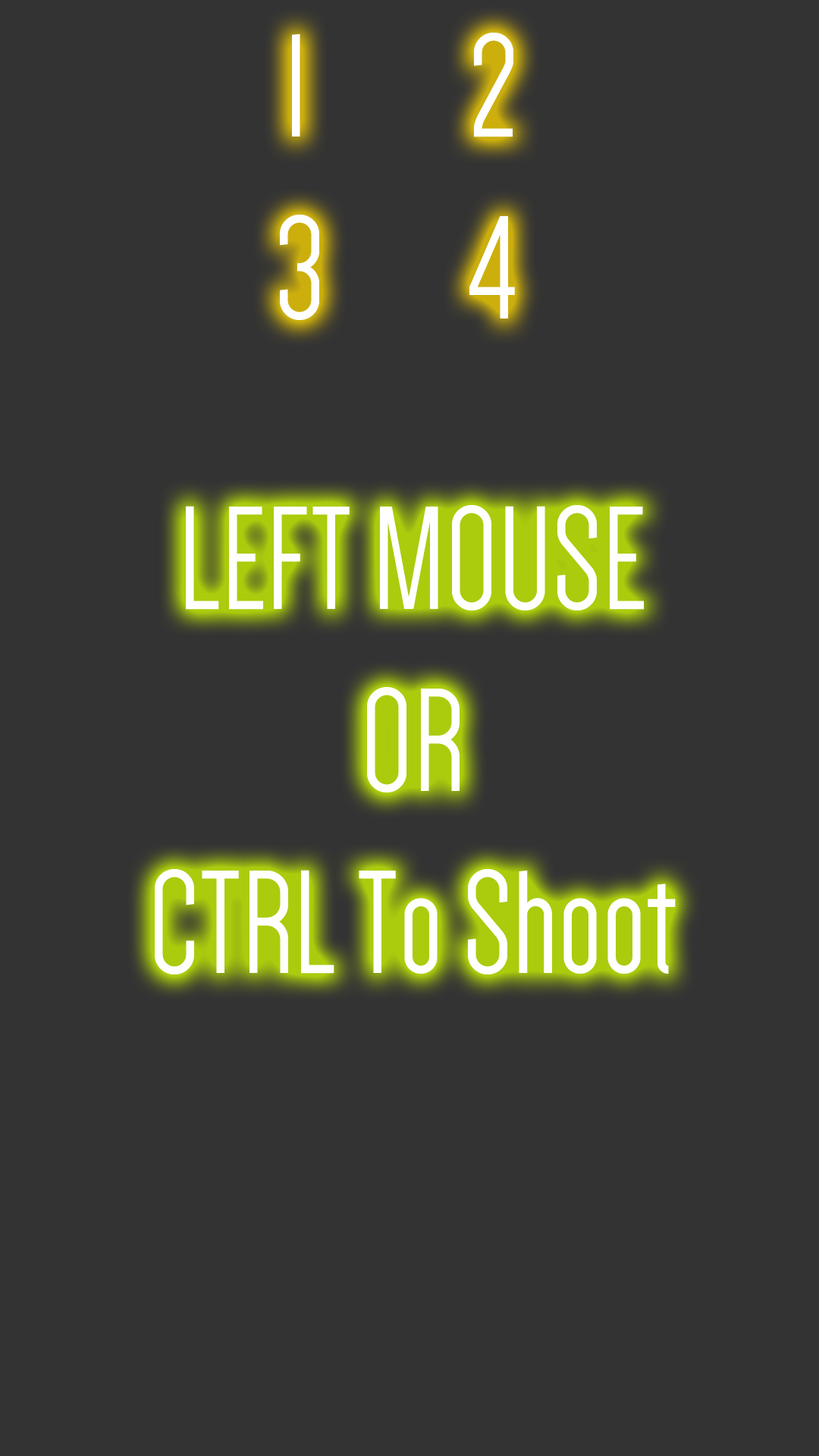
<style>
.page{position:relative;width:819px;height:1456px;background:#333333}
.page>*{position:absolute;margin:0}
.t1{font:151.7px "Dense-Regular";color:#ffffff}
.t2{font:54.6px "Dense-Regular";color:#ffffff}
</style>
<div class="page">
<p class="t1" style="left:280px;top:33px;width:235px;height:287px;text-align:center"><span class="t2">  </span>  1        2 <br>     3 4</p>
<p class="t1" style="left:155px;top:505px;width:521px;height:469px;text-align:center">LEFT MOUSE<br>OR<br>CTRL To Shoot</p>
</div>
